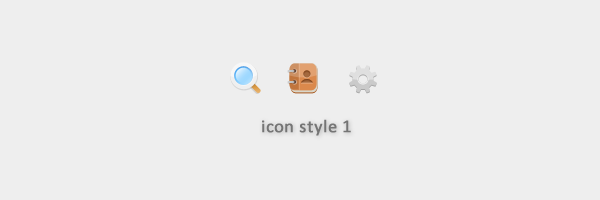
<style>
.page{position:relative;width:600px;height:200px;background:#eeeeee}
.page>*{position:absolute;margin:0}
.t1{font:18px "Calibri";color:#757575;font-weight:bold}
</style>
<div class="page">
<p class="t1" style="left:262px;top:119px;width:89px;height:17px">icon style 1</p>
</div>
